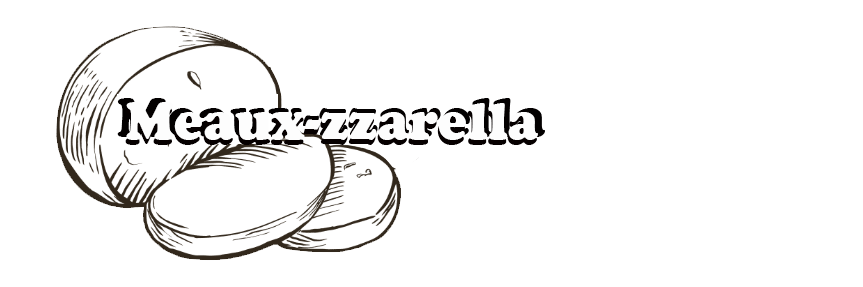
<style>
.page{position:relative;width:863px;height:287px;background:#ffffff}
.page>*{position:absolute;margin:0}
.t1{font:54.1px "CooperBlack";letter-spacing:0.01em;color:#fdfdfd}
</style>
<div class="page">
<p class="t1" style="left:126px;top:102px;width:412px;height:38px">Meaux-zzarella</p>
</div>
